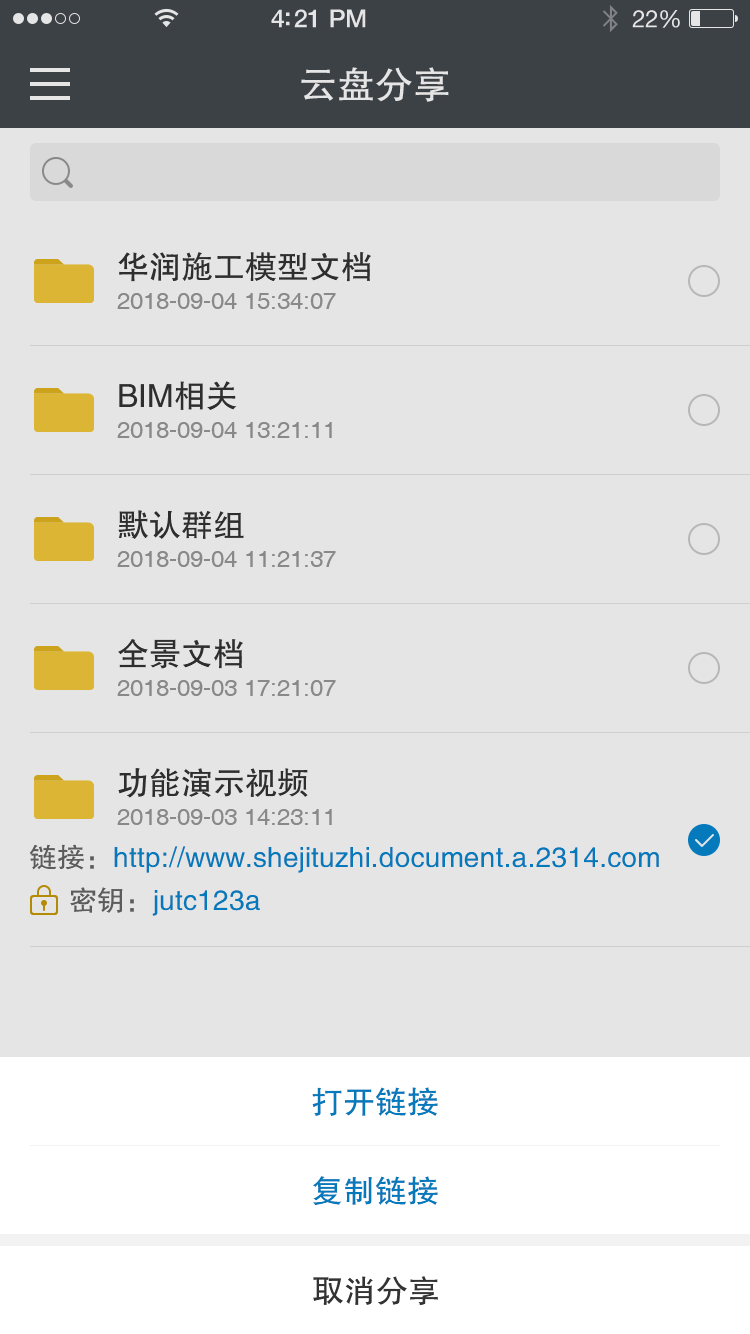
<style>
.page{position:relative;width:750px;height:1334px;background:#e5e5e5}
.page>*{position:absolute;margin:0}
.t1{font:38px "FZHTJW--GB1-0";color:#e5e5e5}
.t2{font:32px "FZHTJW--GB1-0";color:#333333}
.t3{font:24px "Helvetica";color:#999999}
.t4{font:28px "FZHTJW--GB1-0";color:#0487d0}
.t5{font:28px "FZHTJW--GB1-0";color:#666666}
.t6{font:32px "FZHTJW--GB1-0";color:#0479bb}
</style>
<div class="page">
<p class="t1" style="left:301px;top:67px;width:148px;height:35px">云盘分享</p>
<p class="t2" style="left:118px;top:252px;width:253px;height:30px">华润施工模型文档</p>
<p class="t3" style="left:117px;top:293px;width:219px;height:16px">2018-09-04 15:34:07</p>
<p class="t2" style="left:119px;top:381px;width:118px;height:29px">BIM相关</p>
<p class="t3" style="left:117px;top:422px;width:215px;height:16px">2018-09-04 13:21:11</p>
<p class="t2" style="left:118px;top:510px;width:126px;height:29px">默认群组</p>
<p class="t3" style="left:117px;top:551px;width:219px;height:16px">2018-09-04 11:21:37</p>
<p class="t2" style="left:118px;top:639px;width:125px;height:30px">全景文档</p>
<p class="t3" style="left:117px;top:680px;width:219px;height:16px">2018-09-03 17:21:07</p>
<p class="t2" style="left:118px;top:768px;width:190px;height:30px">功能演示视频</p>
<p class="t3" style="left:117px;top:809px;width:215px;height:16px">2018-09-03 14:23:11</p>
<p class="t4" style="left:29px;top:844px;width:630px;height:29px"><span class="t5">链接：</span>http://www.shejituzhi.document.a.2314.com</p>
<p class="t4" style="left:70px;top:887px;width:190px;height:29px"><span class="t5">密钥：</span>jutc123a</p>
<p class="t6" style="left:312px;top:1087px;width:126px;height:29px">打开链接</p>
<p class="t6" style="left:313px;top:1176px;width:125px;height:29px">复制链接</p>
<p class="t2" style="left:313px;top:1276px;width:125px;height:29px">取消分享</p>
</div>
